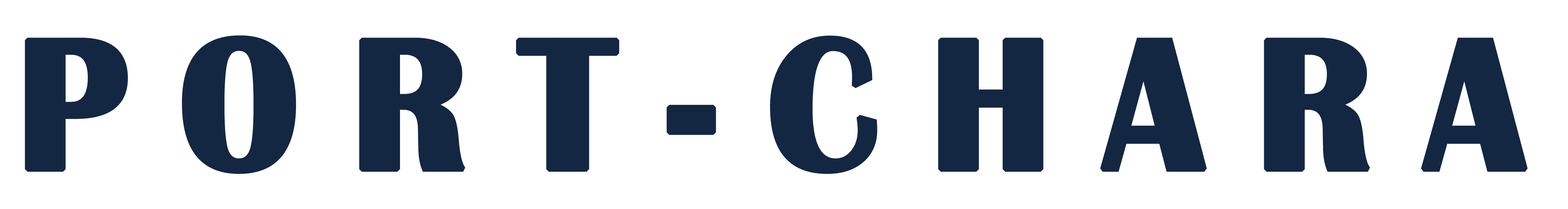
<style>
.page{position:relative;width:1568px;height:209px;background:#ffffff}
.page>*{position:absolute;margin:0}
.t1{font:193.4px "BritannicBold";letter-spacing:0.26em;color:#132743;font-weight:bold;scale:0.95 1}
</style>
<div class="page">
<p class="t1" style="left:25px;top:35px;width:1503px;height:139px">PORT-CHARA</p>
</div>
